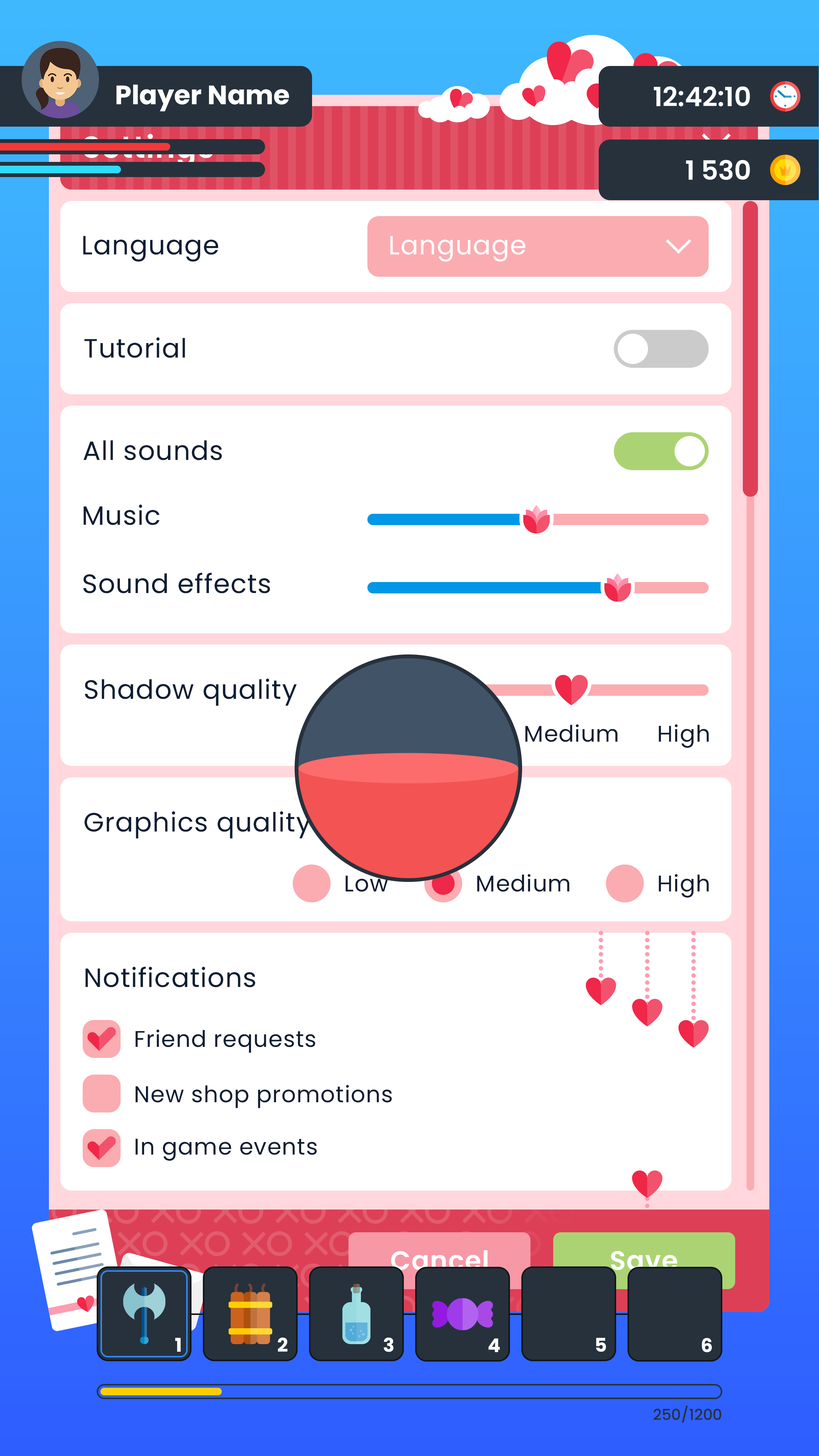
<style>
.page{position:relative;width:819px;height:1456px;background:#ffffff}
.page>*{position:absolute;margin:0}
.t1{font:26.5px "Poppins-Bold";color:#ffffff}
.t2{font:26.5px "Poppins-SemiBold";color:#ffffff}
.t3{font:30.3px "Poppins-SemiBold";letter-spacing:0.025em}
.t4{font:26.5px "Poppins-Regular";letter-spacing:0.025em;color:#0e1d32}
.t5{font:26.5px "Poppins-Regular";letter-spacing:0.025em;color:#ffffff}
.t6{font:22.7px "Poppins-Regular";letter-spacing:0.025em;color:#0e1d32}
.t7{font:26.5px "Poppins-SemiBold";letter-spacing:0.025em;color:#ffffff}
.t8{font:19px "Poppins-Bold";color:#ffffff}
.t9{font:15.2px "Poppins-Medium";color:#26313c}
</style>
<div class="page">
<p class="t1" style="left:116px;top:85px;width:173px;height:26px">Player Name</p>
<p class="t2" style="left:654px;top:86px;width:96px;height:21px">12:42:10</p>
<p class="t3" style="left:84px;top:134px;width:129px;height:32px">Settings</p>
<p class="t2" style="left:686px;top:160px;width:64px;height:20px">1 530</p>
<p class="t4" style="left:83px;top:236px;width:135px;height:26px">Language</p>
<p class="t5" style="left:390px;top:236px;width:136px;height:26px">Language</p>
<p class="t4" style="left:84px;top:337px;width:101px;height:21px">Tutorial</p>
<p class="t4" style="left:83px;top:440px;width:139px;height:20px">All sounds</p>
<p class="t4" style="left:83px;top:504px;width:77px;height:21px">Music</p>
<p class="t4" style="left:83px;top:573px;width:187px;height:20px">Sound effects</p>
<p class="t4" style="left:85px;top:678px;width:212px;height:28px">Shadow quality</p>
<p class="t6" style="left:525px;top:724px;width:93px;height:18px">Medium</p>
<p class="t6" style="left:659px;top:724px;width:50px;height:24px">High</p>
<p class="t4" style="left:85px;top:811px;width:226px;height:28px">Graphics quality</p>
<p class="t6" style="left:345px;top:875px;width:43px;height:17px">Low</p>
<p class="t6" style="left:477px;top:874px;width:93px;height:18px">Medium</p>
<p class="t6" style="left:659px;top:874px;width:50px;height:24px">High</p>
<p class="t4" style="left:85px;top:966px;width:170px;height:21px">Notifications</p>
<p class="t6" style="left:135px;top:1029px;width:180px;height:24px">Friend requests</p>
<p class="t6" style="left:135px;top:1085px;width:257px;height:23px">New shop promotions</p>
<p class="t6" style="left:135px;top:1139px;width:182px;height:22px">In game events</p>
<p class="t7" style="left:391px;top:1250px;width:97px;height:20px">Cancel</p>
<p class="t7" style="left:611px;top:1251px;width:66px;height:19px">Save</p>
<p class="t8" style="left:175px;top:1338px;width:6px;height:14px">1</p>
<p class="t8" style="left:278px;top:1337px;width:9px;height:15px">2</p>
<p class="t8" style="left:384px;top:1337px;width:10px;height:15px">3</p>
<p class="t8" style="left:596px;top:1338px;width:10px;height:14px">5</p>
<p class="t8" style="left:702px;top:1338px;width:10px;height:14px">6</p>
<p class="t8" style="left:488px;top:1338px;width:12px;height:14px">4</p>
<p class="t9" style="left:654px;top:1406px;width:68px;height:17px">250/1200</p>
</div>
